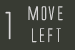
<style>
.page{position:relative;width:75px;height:50px;background:#383b33}
.page>*{position:absolute;margin:0}
.t1{font:18px "AlienLeague";color:#dbdada}
.t2{font:36px "AlienLeague";color:#dbdada}
</style>
<div class="page">
<p class="t1" style="left:28px;top:6px;width:35px;height:37px;text-align:center">move<br>left</p>
<p class="t2" style="left:5px;top:11px;width:6px;height:29px">1</p>
</div>
